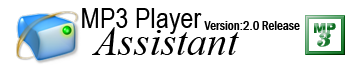
<style>
.page{position:relative;width:360px;height:72px;background:#ffffff}
.page>*{position:absolute;margin:0}
.t1{font:28.5px "ArialNarrow";color:#000000}
.t2{font:40px "TimesNewRomanPS-ItalicMT";color:#000000}
.t3{font:13px "FranklinGothic-MediumCond";color:#000000}
</style>
<div class="page">
<p class="t1" style="left:82px;top:8px;width:120px;height:26px">MP3 Player</p>
<p class="t2" style="left:92px;top:27px;width:147px;height:28px">Assistant</p>
<p class="t3" style="left:204px;top:21px;width:96px;height:9px">Version:2.0 Release</p>
</div>
